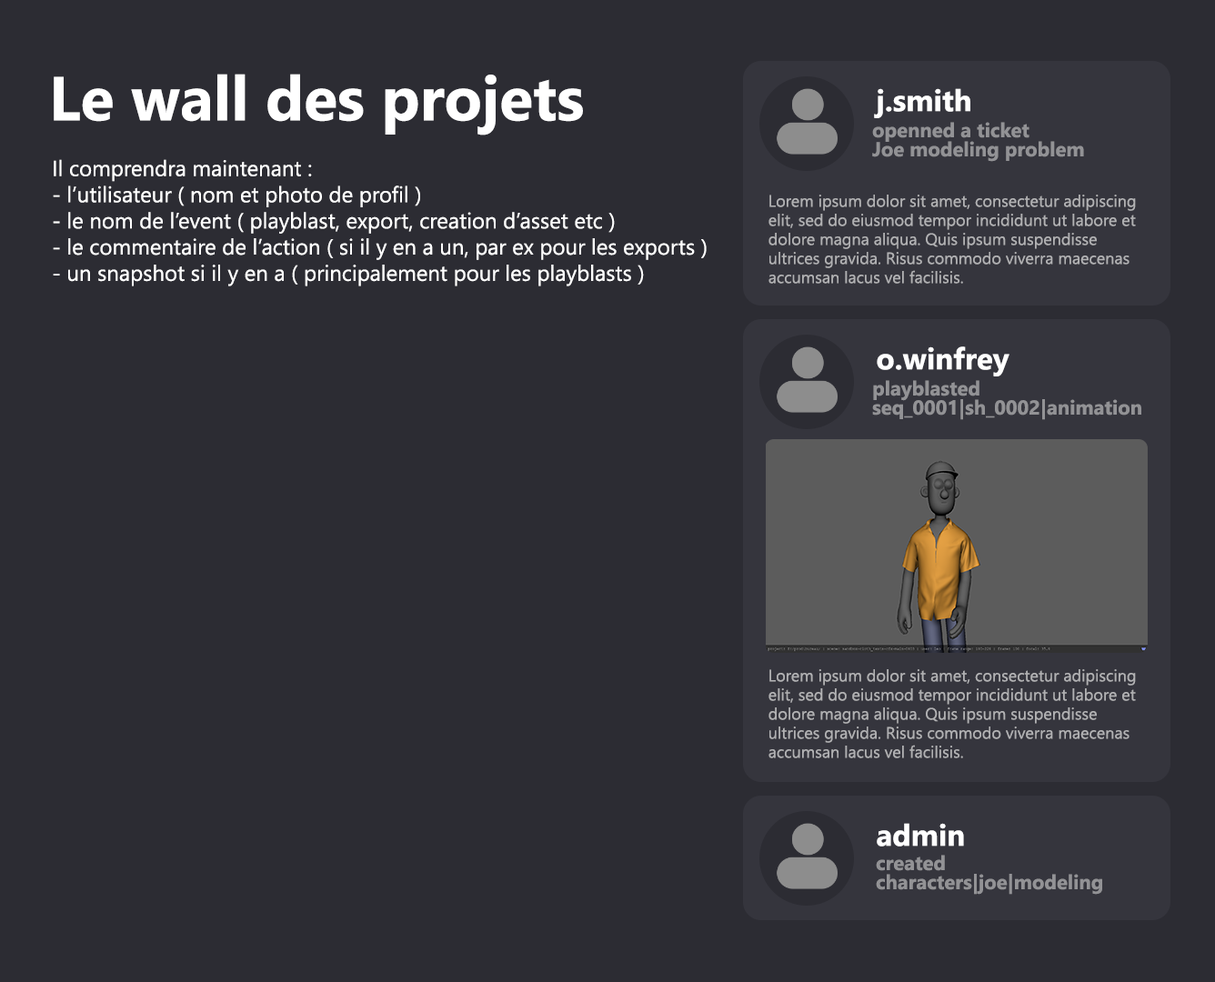
<style>
.page{position:relative;width:1215px;height:982px;background:#2c2c33}
.page>*{position:absolute;margin:0}
.t1{font:61.8px "LeelawadeeUI-Bold";color:#ffffff}
.t2{font:30px "LeelawadeeUI-Bold";color:#ffffff}
.t3{font:20px/19.1px "LeelawadeeUI-Bold";color:#929295}
.t4{font:21.8px "LeelawadeeUI";color:#ffffff}
.t5{font:16.4px/19.1px "LeelawadeeUI";color:#b1b1b3}
</style>
<div class="page">
<p class="t1" style="left:54px;top:74px;width:529px;height:61px">Le wall des projets</p>
<p class="t2" style="left:874px;top:88px;width:96px;height:30px">j.smith</p>
<p class="t3" style="left:872px;top:122px;width:212px;height:40px">openned a ticket<br>Joe modeling problem</p>
<p class="t4" style="left:53px;top:159px;width:653px;height:127px">Il comprendra maintenant :<br>- l’utilisateur ( nom et photo de profil )<br>- le nom de l’event ( playblast, export, creation d’asset etc )<br>- le commentaire de l’action ( si il y en a un, par ex pour les exports )<br>- un snapshot si il y en a ( principalement pour les playblasts )</p>
<p class="t5" style="left:768px;top:195px;width:367px;height:89px">Lorem ipsum dolor sit amet, consectetur adipiscing elit, sed do eiusmod tempor incididunt ut labore et dolore magna aliqua. Quis ipsum suspendisse ultrices gravida. Risus commodo viverra maecenas accumsan lacus vel facilisis.</p>
<p class="t2" style="left:876px;top:346px;width:133px;height:30px">o.winfrey</p>
<p class="t3" style="left:872px;top:380px;width:269px;height:40px">playblasted <br>seq_0001|sh_0002|animation</p>
<p class="t5" style="left:768px;top:669px;width:367px;height:89px">Lorem ipsum dolor sit amet, consectetur adipiscing elit, sed do eiusmod tempor incididunt ut labore et dolore magna aliqua. Quis ipsum suspendisse ultrices gravida. Risus commodo viverra maecenas accumsan lacus vel facilisis.</p>
<p class="t2" style="left:876px;top:823px;width:88px;height:23px">admin</p>
<p class="t3" style="left:875px;top:855px;width:227px;height:40px">created characters|joe|modeling</p>
</div>
